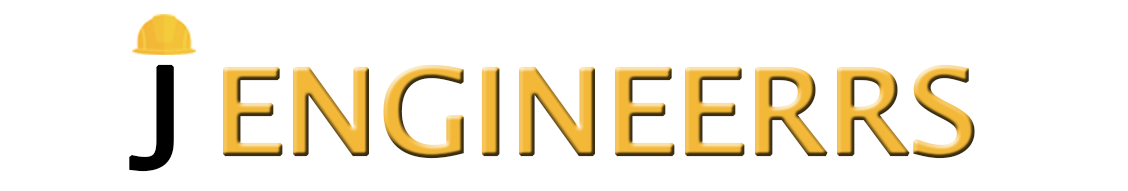
<style>
.page{position:relative;width:1128px;height:191px;background:#ffffff}
.page>*{position:absolute;margin:0}
.t1{font:117.5px "LucidaSansUnicode";letter-spacing:-0.03em;color:#000000;font-weight:bold;scale:1.11 1}
.t2{font:117.5px "LucidaSansUnicode";letter-spacing:-0.03em;font-weight:bold;scale:1.11 1}
.t3{font:117.5px "Microsoft-Yi-Baiti";letter-spacing:-0.03em;font-weight:bold;scale:1.11 1}
</style>
<div class="page">
<p class="t1" style="left:129px;top:64px;width:45px;height:108px">J</p>
<p class="t2" style="left:223px;top:64px;width:752px;height:95px"><span class="t3"> </span>ENGINEERRS</p>
</div>
